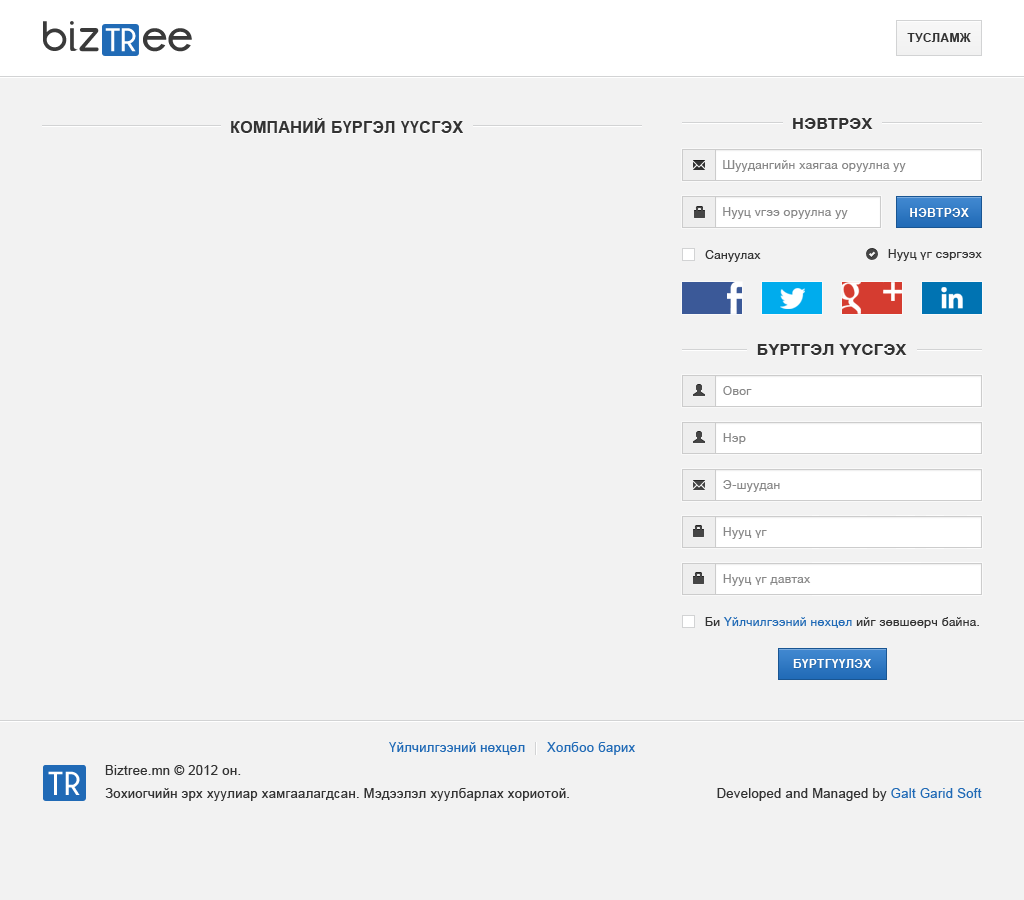
<style>
.page{position:relative;width:1024px;height:900px;background:#f2f2f2}
.page>*{position:absolute;margin:0}
.t1{font:44.8px "SFNewRepublic";color:#333333}
.t2{font:45.4px "VarelaRound-Regular";color:#333333}
.t3{font:32.7px "Champagne&Limousines-Bold";color:#ffffff}
.t4{font:46.9px "Champagne&Limousines-Bold";color:#3a3a3a}
.t5{font:12px "Arial-BoldMT";letter-spacing:0.03em;color:#333333;text-transform:uppercase}
.t6{font:16px "Arial-BoldMT";letter-spacing:0.03em;color:#333333;text-transform:uppercase}
.t7{font:16px "HelveticaNeue-Bold";letter-spacing:0.03em;color:#333333;text-transform:uppercase}
.t8{font:12px "HelveticaNeue";letter-spacing:0.03em;color:#888888}
.t9{font:12px "Arial-BoldMT";letter-spacing:0.03em;color:#ffffff;text-transform:uppercase}
.t10{font:12px "HelveticaNeue";letter-spacing:0.03em;color:#333333}
.t11{font:12px "HelveticaNeue";letter-spacing:0.03em;color:#206ab6}
.t12{font:13px "ArialMT";letter-spacing:0.03em;color:#206ab6}
.t13{font:33px "Champagne&Limousines-Bold";letter-spacing:0.03em;color:#ffffff}
.t14{font:13px "ArialMT";letter-spacing:0.03em;color:#333333}
</style>
<div class="page">
<p class="t1" style="left:43px;top:21px;width:24px;height:30px">b</p>
<p class="t2" style="left:79px;top:28px;width:20px;height:24px">z</p>
<p class="t3" style="left:105px;top:28px;width:31px;height:24px">TR</p>
<p class="t4" style="left:143px;top:28px;width:49px;height:24px">ee</p>
<p class="t5" style="left:907px;top:33px;width:64px;height:9px">Тусламж</p>
<p class="t6" style="left:231px;top:118px;width:232px;height:15px">Компаний бүргэл үүсгэх</p>
<p class="t7" style="left:793px;top:118px;width:80px;height:11px">НЭВТРЭХ</p>
<p class="t8" style="left:723px;top:160px;width:183px;height:12px">Шуудангийн хаягаа оруулна уу</p>
<p class="t8" style="left:723px;top:207px;width:125px;height:12px">Нууц vгээ оруулна уу</p>
<p class="t9" style="left:910px;top:208px;width:59px;height:9px">Нэвтрэх</p>
<p class="t10" style="left:705px;top:250px;width:56px;height:12px">Сануулах</p>
<p class="t10" style="left:888px;top:249px;width:94px;height:12px">Нууц үг сэргээх</p>
<p class="t7" style="left:757px;top:344px;width:150px;height:11px">Бүртгэл үүсгэх</p>
<p class="t8" style="left:723px;top:386px;width:29px;height:9px">Овог</p>
<p class="t8" style="left:723px;top:433px;width:23px;height:11px">Нэр</p>
<p class="t8" style="left:723px;top:480px;width:57px;height:12px">Э-шуудан</p>
<p class="t8" style="left:723px;top:527px;width:44px;height:12px">Нууц үг</p>
<p class="t8" style="left:723px;top:574px;width:88px;height:12px">Нууц үг давтаx</p>
<p class="t11" style="left:705px;top:617px;width:274px;height:11px"><span class="t10">Би </span>Үйлчилгээний нөxцөл<span class="t10"> ийг зөвшөөрч байна.</span></p>
<p class="t9" style="left:793px;top:659px;width:78px;height:9px">Бүртгүүлэх</p>
<p class="t12" style="left:389px;top:742px;width:136px;height:13px">Үйлчилгээний нөxцөл</p>
<p class="t12" style="left:547px;top:742px;width:88px;height:13px">Холбоо барих</p>
<p class="t13" style="left:48px;top:771px;width:32px;height:24px">TR</p>
<p class="t14" style="left:105px;top:765px;width:136px;height:10px">Biztree.mn © 2012 он.</p>
<p class="t14" style="left:105px;top:788px;width:464px;height:13px">Зохиогчийн эрх хуулиар хамгаалагдсан. Мэдээлэл хуулбарлах хориотой.</p>
<p class="t14" style="left:717px;top:788px;width:265px;height:13px">Developed and Managed by <span class="t12">Galt Garid Soft</span></p>
</div>
